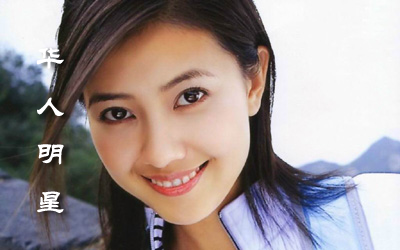
<style>
.page{position:relative;width:400px;height:250px}
.page>*{position:absolute;margin:0}
.t1{font:30px/48px "STLiti";color:#ffffff}
</style>
<div class="page">
<p class="t1" style="left:36px;top:47px;width:28px;height:166px">华<br>人<br>明<br>星</p>
</div>
